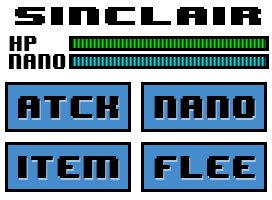
<style>
.page{position:relative;width:272px;height:200px;background:#ffffff}
.page>*{position:absolute;margin:0}
.t1{font:21px/48px "8BITWONDERNominal";color:#000000;scale:1.71 1}
.t2{font:30px/48px "MyriadPro-Regular";color:#000000}
.t3{font:18px "8BITWONDERNominal";color:#000000;scale:0.82 1}
.t4{font:26.1px "8BITWONDERNominal";color:#000000}
</style>
<div class="page">
<p class="t1" style="left:15px;top:7px;width:246px;height:18px;text-align:right">SINCLAIR<br><span class="t2">jk 6hp</span></p>
<p class="t3" style="left:9px;top:36px;width:28px;height:15px">HP</p>
<p class="t3" style="left:9px;top:54px;width:57px;height:15px">NANO</p>
<p class="t4" style="left:18px;top:96px;width:101px;height:22px">ATCK</p>
<p class="t4" style="left:154px;top:96px;width:101px;height:22px">NANO</p>
<p class="t4" style="left:18px;top:156px;width:101px;height:22px">ITEM</p>
<p class="t4" style="left:154px;top:156px;width:101px;height:22px">FLEE</p>
</div>
